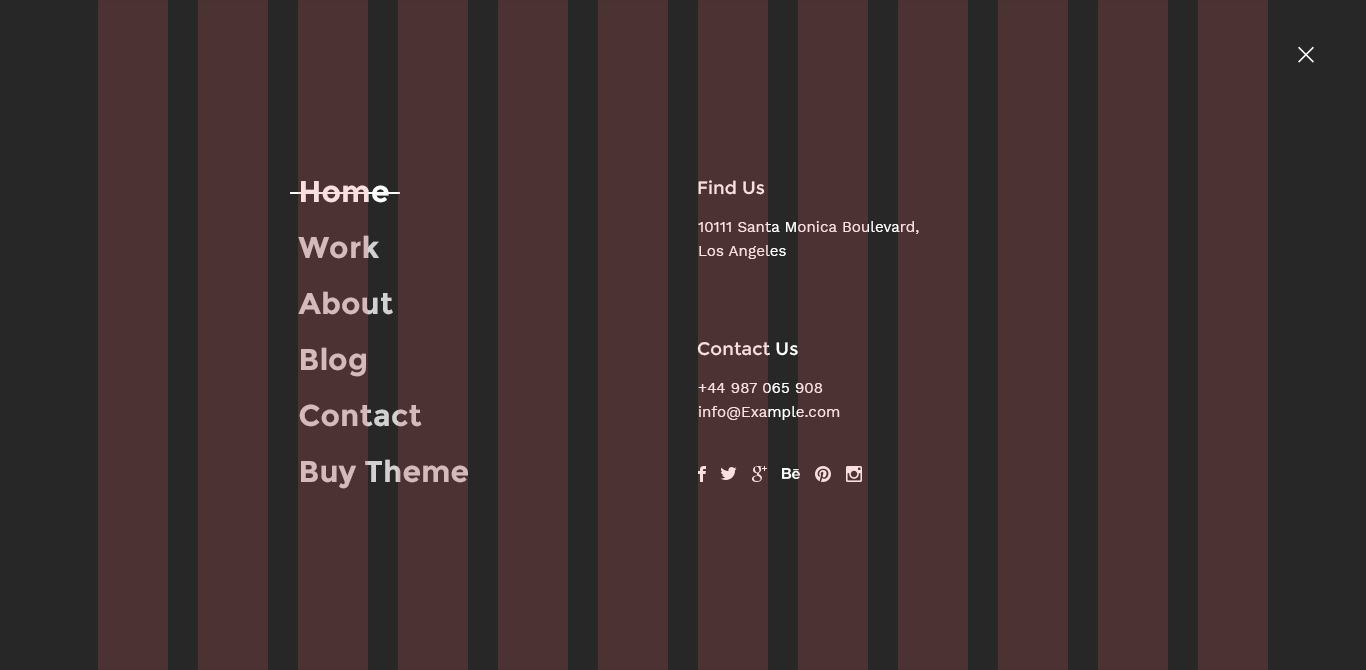
<style>
.page{position:relative;width:1366px;height:670px;background:#4c3232}
.page>*{position:absolute;margin:0}
.t1{font:30px/56px "Montserrat-Bold";letter-spacing:0.005em;color:#d1d1d1}
.t2{font:30px/56px "Montserrat-Bold";letter-spacing:0.005em;color:#ffffff}
.t3{font:18px "Montserrat-Regular";letter-spacing:0.005em;color:#f9dfdf}
.t4{font:15px/24px "WorkSans-Regular";letter-spacing:0.005em;color:#f9dfdf}
</style>
<div class="page">
<p class="t1" style="left:298px;top:181px;width:170px;height:308px"><span class="t2">Home<br></span>Work<br>About<br>Blog<br>Contact<br>Buy Theme</p>
<p class="t3" style="left:698px;top:180px;width:67px;height:15px">Find Us</p>
<p class="t4" style="left:698px;top:221px;width:221px;height:38px">10111 Santa Monica Boulevard,<br>Los Angeles</p>
<p class="t3" style="left:697px;top:342px;width:101px;height:14px">Contact Us</p>
<p class="t4" style="left:698px;top:383px;width:142px;height:37px">+44 987 065 908<br>info@Example.com</p>
</div>
